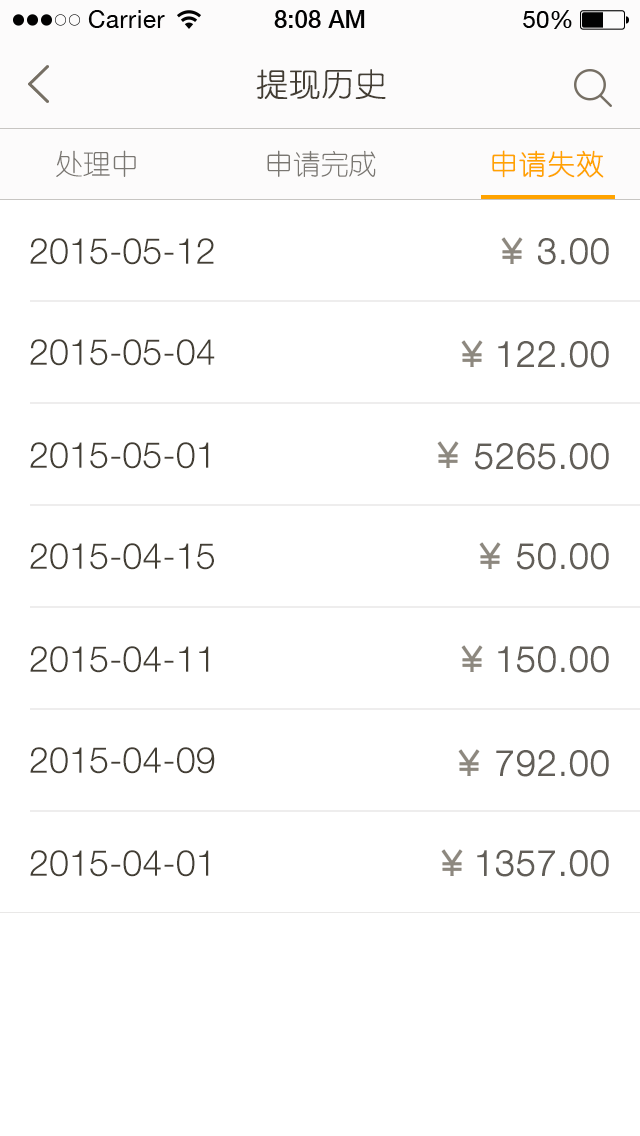
<style>
.page{position:relative;width:640px;height:1136px;background:#ffffff}
.page>*{position:absolute;margin:0}
.t1{font:32px "YouYuan";color:#433d33;text-transform:uppercase;font-weight:bold}
.t2{font:28px "YouYuan";color:#7a7772;text-transform:uppercase}
.t3{font:28px "YouYuan";color:#ffa300;text-transform:uppercase;font-weight:bold}
.t4{font:36px "HelveticaNeueLTPro-Lt";color:#433e34;text-transform:uppercase}
.t5{font:36px "HelveticaNeueLTPro-Lt";color:#625e58;text-transform:uppercase;font-weight:bold}
</style>
<div class="page">
<p class="t1" style="left:256px;top:69px;width:130px;height:30px">提现历史</p>
<p class="t2" style="left:56px;top:150px;width:80px;height:27px">处理中</p>
<p class="t2" style="left:267px;top:150px;width:109px;height:27px">申请完成</p>
<p class="t3" style="left:492px;top:150px;width:112px;height:28px">申请失效</p>
<p class="t4" style="left:30px;top:238px;width:184px;height:27px">2015-05-12</p>
<p class="t5" style="left:538px;top:238px;width:71px;height:27px">3.00</p>
<p class="t4" style="left:30px;top:339px;width:185px;height:27px">2015-05-04</p>
<p class="t5" style="left:498px;top:341px;width:111px;height:27px">122.00</p>
<p class="t4" style="left:30px;top:442px;width:179px;height:27px">2015-05-01</p>
<p class="t5" style="left:475px;top:443px;width:134px;height:27px">5265.00</p>
<p class="t4" style="left:30px;top:543px;width:184px;height:27px">2015-04-15</p>
<p class="t5" style="left:517px;top:543px;width:92px;height:27px">50.00</p>
<p class="t4" style="left:30px;top:646px;width:179px;height:27px">2015-04-11</p>
<p class="t5" style="left:498px;top:646px;width:111px;height:27px">150.00</p>
<p class="t4" style="left:30px;top:747px;width:185px;height:27px">2015-04-09</p>
<p class="t5" style="left:496px;top:750px;width:113px;height:27px">792.00</p>
<p class="t4" style="left:30px;top:850px;width:179px;height:27px">2015-04-01</p>
<p class="t5" style="left:477px;top:850px;width:132px;height:27px">1357.00</p>
</div>
